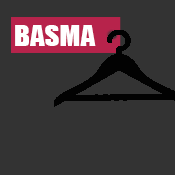
<style>
.page{position:relative;width:175px;height:175px;background:#333333}
.page>*{position:absolute;margin:0}
.t1{font:27.2px "Impact";color:#ffffff;scale:1.06 1}
</style>
<div class="page">
<p class="t1" style="left:15px;top:25px;width:81px;height:21px">BASMA</p>
</div>
